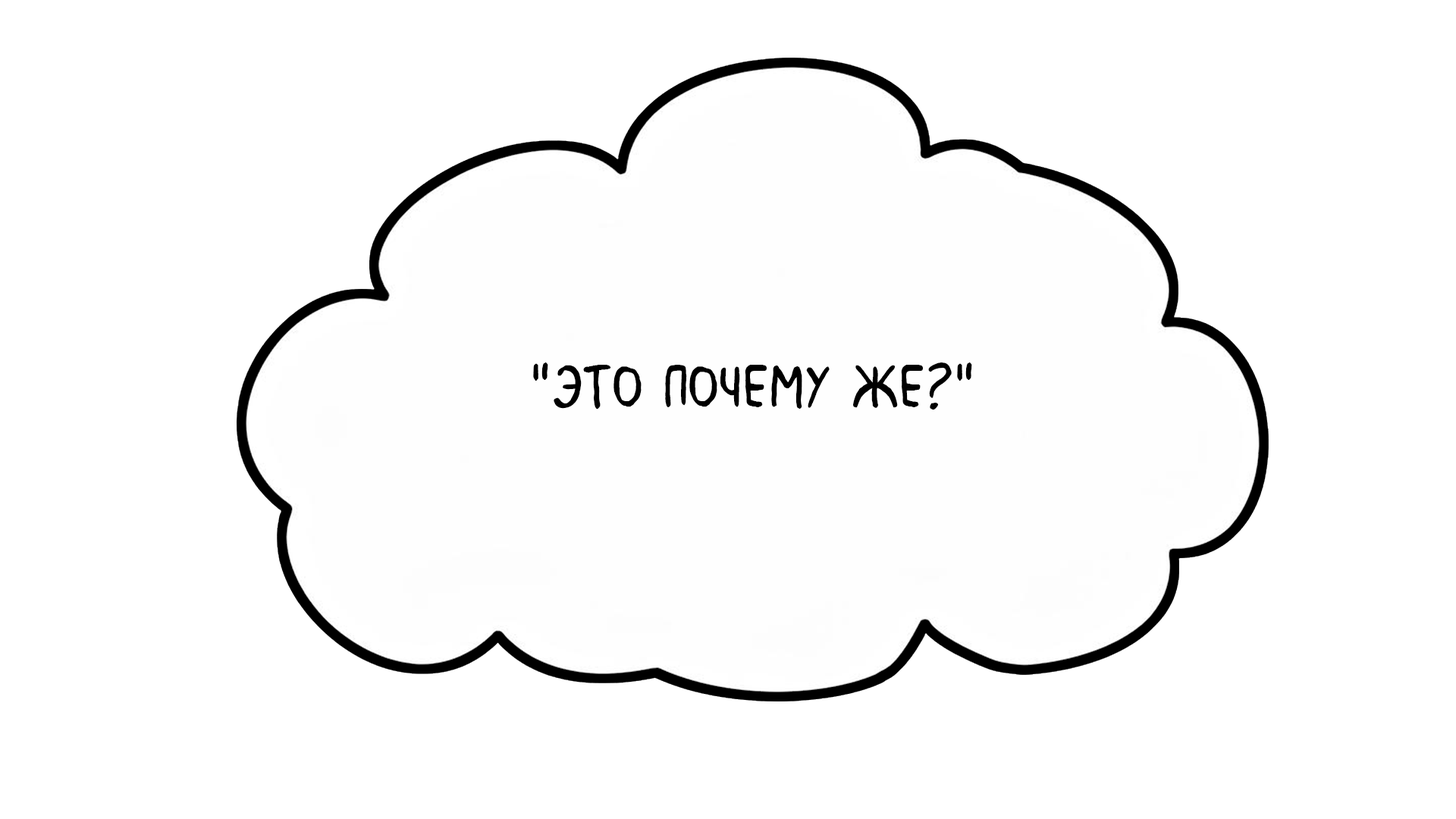
<style>
.page{position:relative;width:1456px;height:819px;background:#ffffff}
.page>*{position:absolute;margin:0}
.t1{font:64.5px "MilkMustacheBB";color:#000000}
.t2{font:54.6px "MyriadPro-Regular";color:#000000}
</style>
<div class="page">
<p class="t1" style="left:533px;top:362px;width:439px;height:48px"><span class="t2"> </span>"Это почему же?"</p>
</div>
